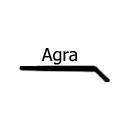
<style>
.page{position:relative;width:128px;height:128px;background:#ffffff}
.page>*{position:absolute;margin:0}
.t1{font:17.9px "Tahoma";color:#000000}
</style>
<div class="page">
<p class="t1" style="left:41px;top:48px;width:36px;height:17px">Agra</p>
</div>
